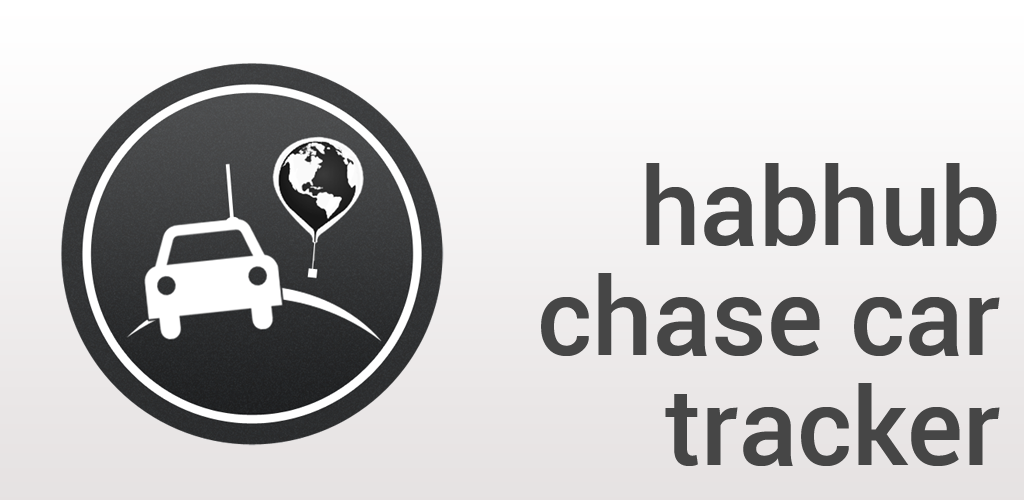
<style>
.page{position:relative;width:1024px;height:500px}
.page>*{position:absolute;margin:0}
.t1{font:107px/110px "Roboto-Medium";color:#464646}
</style>
<div class="page">
<p class="t1" style="left:541px;top:163px;width:459px;height:303px;text-align:right">habhub<br>chase car<br>tracker</p>
</div>
